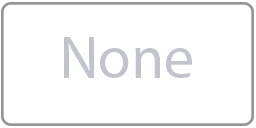
<style>
.page{position:relative;width:256px;height:128px;background:#ffffff}
.page>*{position:absolute;margin:0}
.t1{font:60px "MyriadPro-Regular";color:#c1c4cc}
</style>
<div class="page">
<p class="t1" style="left:64px;top:37px;width:128px;height:41px">None</p>
</div>
